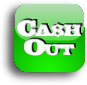
<style>
.page{position:relative;width:87px;height:85px}
.page>*{position:absolute;margin:0}
.t1{font:18px/8px "BigMummy";letter-spacing:-0.1em;font-variant:small-caps}
.t2{font:24px/8px "BigMummy";letter-spacing:-0.1em;font-variant:small-caps}
</style>
<div class="page">
<p class="t1" style="left:17px;top:18px;width:66px;height:38px;text-align:center"><span class="t2">C</span>A$H<br><span class="t2">Out</span></p>
</div>
